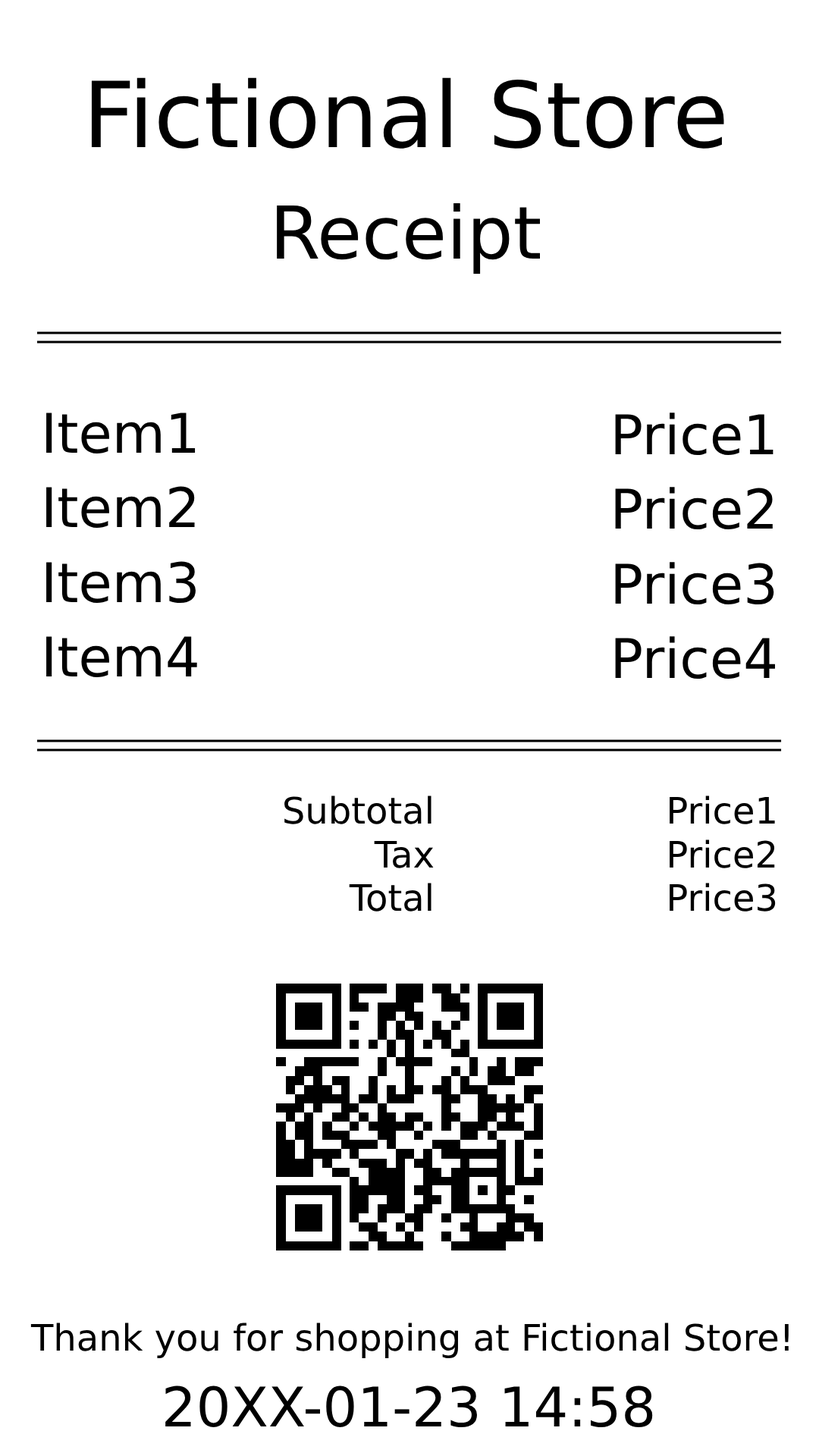
<style>
.page{position:relative;width:819px;height:1456px;background:#ffffff}
.page>*{position:absolute;margin:0}
.t1{font:91px "DejaVuSans";color:#000000}
.t2{font:72.8px "DejaVuSans";color:#000000}
.t3{font:54.6px "DejaVuSans";color:#000000}
.t4{font:36.4px "DejaVuSans";color:#000000}
</style>
<div class="page">
<p class="t1" style="left:91px;top:77px;width:633px;height:197px;text-align:center">Fictional Store<br><span class="t2">Receipt</span></p>
<p class="t3" style="left:46px;top:413px;width:151px;height:265px">Item1<br>Item2<br>Item3<br>Item4</p>
<p class="t3" style="left:615px;top:413px;width:160px;height:266px;text-align:right">Price1<br>Price2<br>Price3<br>Price4</p>
<p class="t4" style="left:284px;top:795px;width:150px;height:117px;text-align:right">Subtotal<br>Tax<br>Total</p>
<p class="t4" style="left:670px;top:795px;width:106px;height:117px;text-align:right">Price1<br>Price2<br>Price3</p>
<p class="t4" style="left:30px;top:1323px;width:759px;height:35px">Thank you for shopping at Fictional Store!</p>
<p class="t3" style="left:165px;top:1385px;width:488px;height:43px">20XX-01-23 14:58</p>
</div>
